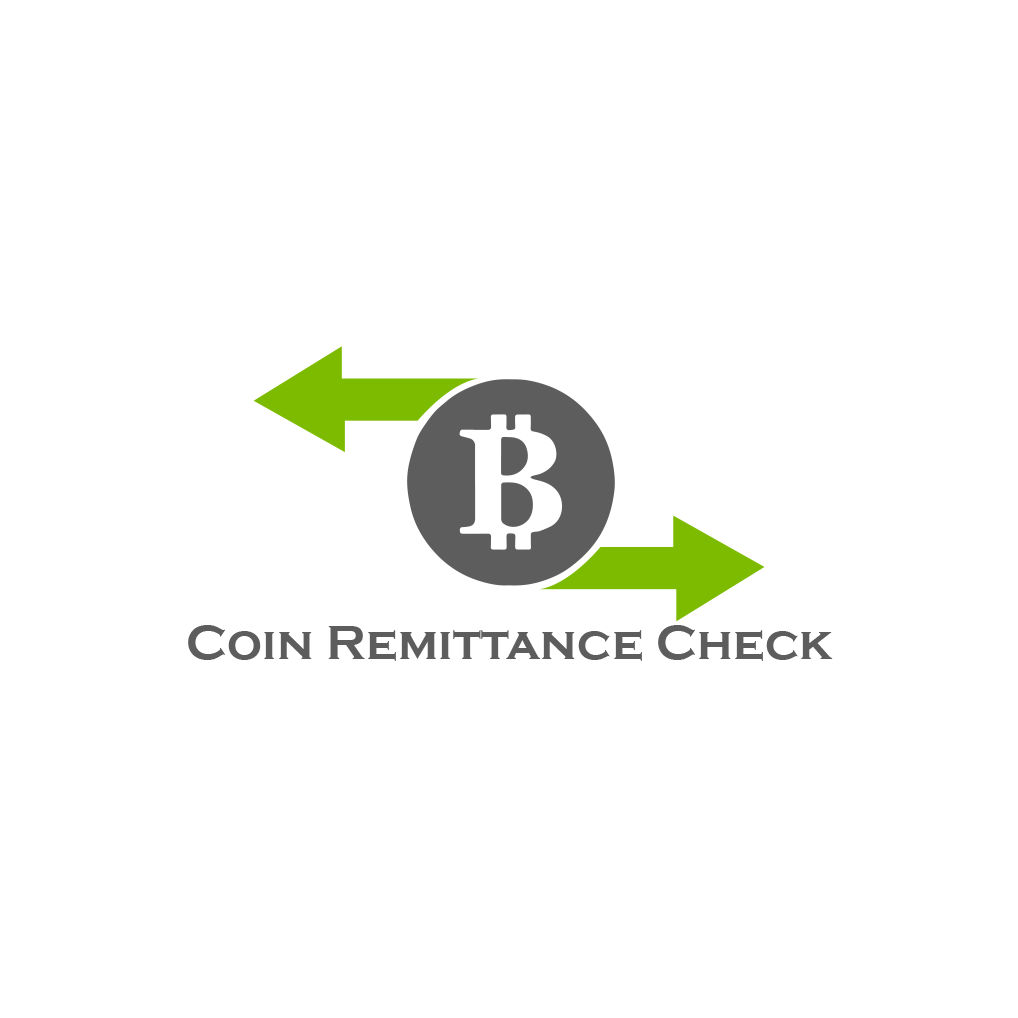
<style>
.page{position:relative;width:1018px;height:1018px;background:#ffffff}
.page>*{position:absolute;margin:0}
.t1{font:49.5px "CopperplateGothic-Bold";color:#5d5d5d}
</style>
<div class="page">
<p class="t1" style="left:188px;top:625px;width:645px;height:36px">Coin Remittance Check</p>
</div>
